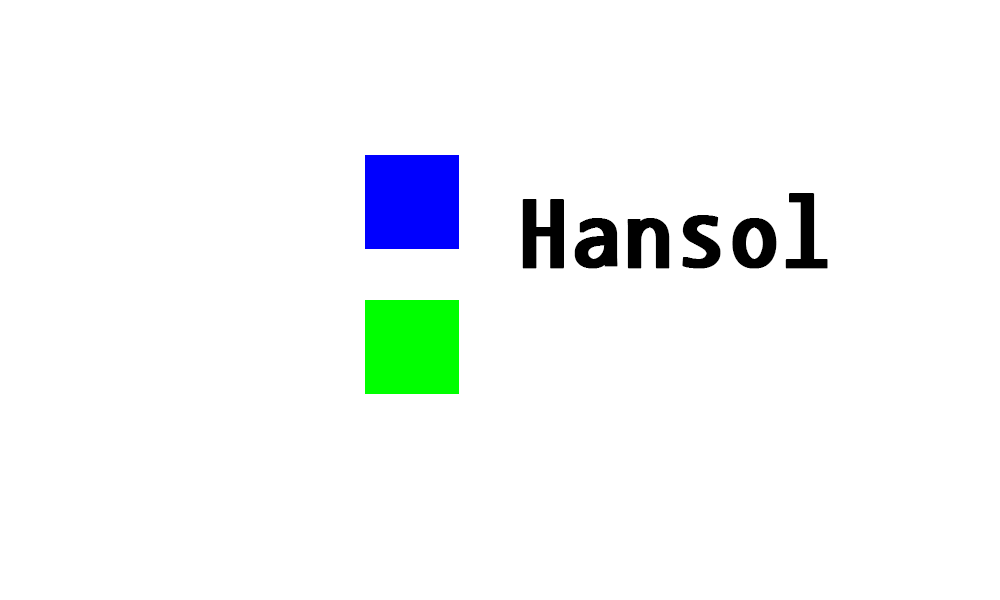
<style>
.page{position:relative;width:1000px;height:600px;background:#ffffff}
.page>*{position:absolute;margin:0}
.t1{font:100px "NanumGothicCoding-Bold";color:#000000;font-weight:bold}
</style>
<div class="page">
<p class="t1" style="left:522px;top:193px;width:306px;height:76px">Hansol</p>
</div>
